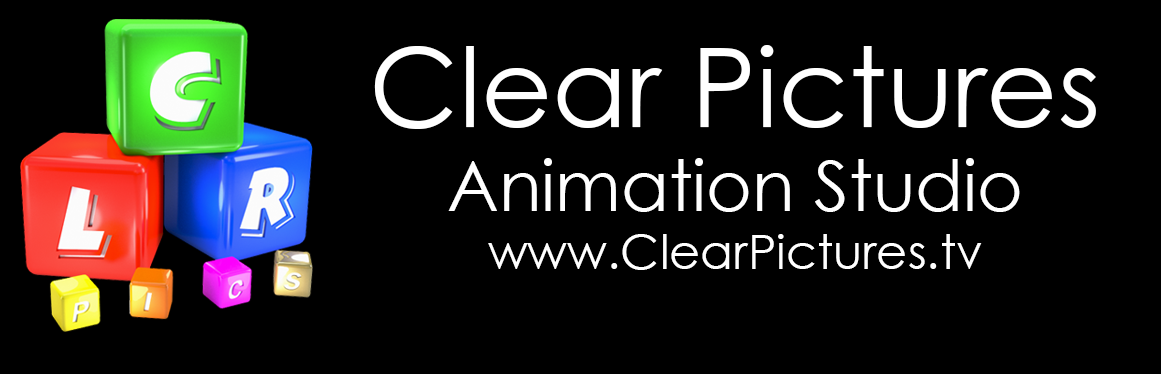
<style>
.page{position:relative;width:1161px;height:374px;background:#000000}
.page>*{position:absolute;margin:0}
.t1{font:48px "CenturyGothic";color:#ffffff}
.t2{font:110px "CenturyGothic";color:#ffffff}
.t3{font:70px "CenturyGothic";color:#ffffff}
</style>
<div class="page">
<p class="t1" style="left:374px;top:45px;width:722px;height:225px;text-align:center"><span class="t2">Clear Pictures<br></span><span class="t3">Animation Studio<br></span>www.ClearPictures.tv</p>
</div>
